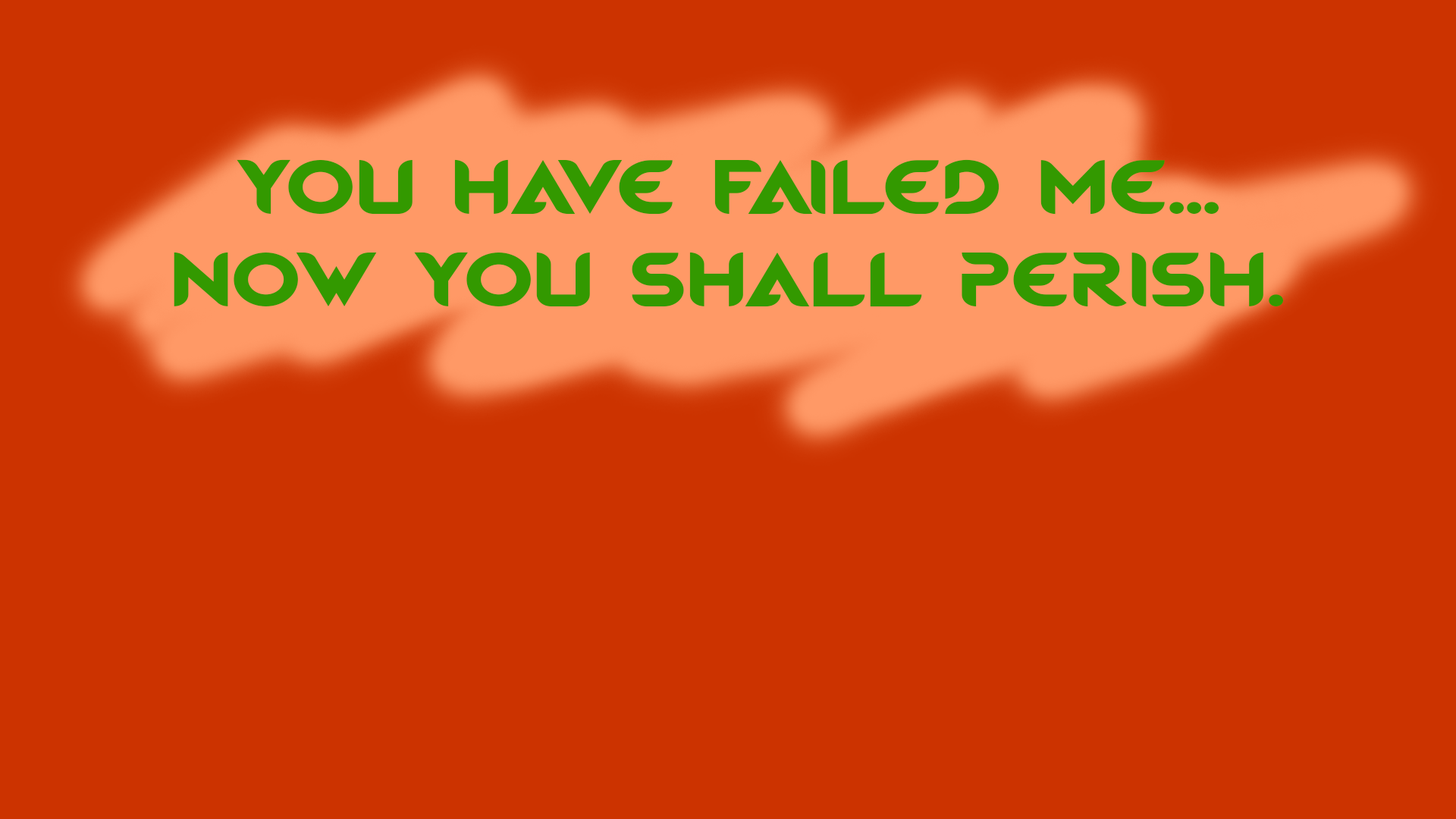
<style>
.page{position:relative;width:1456px;height:819px;background:#cc3300}
.page>*{position:absolute;margin:0}
.t1{font:74.3px "MagmawaveCaps-Bold";color:#339900;scale:1.2 1}
</style>
<div class="page">
<p class="t1" style="left:237px;top:159px;width:982px;height:56px">You have failed me...</p>
<p class="t1" style="left:174px;top:252px;width:1109px;height:55px">Now you shall perish.</p>
</div>
